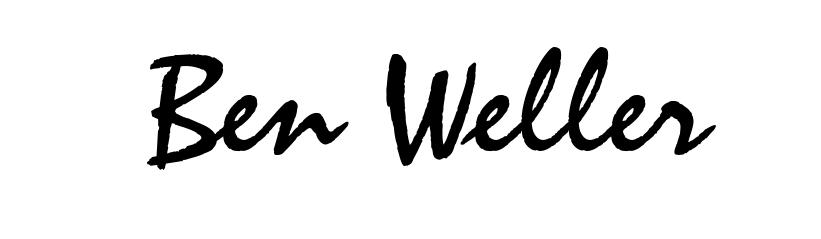
<style>
.page{position:relative;width:821px;height:239px;background:#ffffff}
.page>*{position:absolute;margin:0}
.t1{font:150px "STZephyr";color:#000000}
</style>
<div class="page">
<p class="t1" style="left:146px;top:47px;width:570px;height:123px">Ben Weller</p>
</div>
